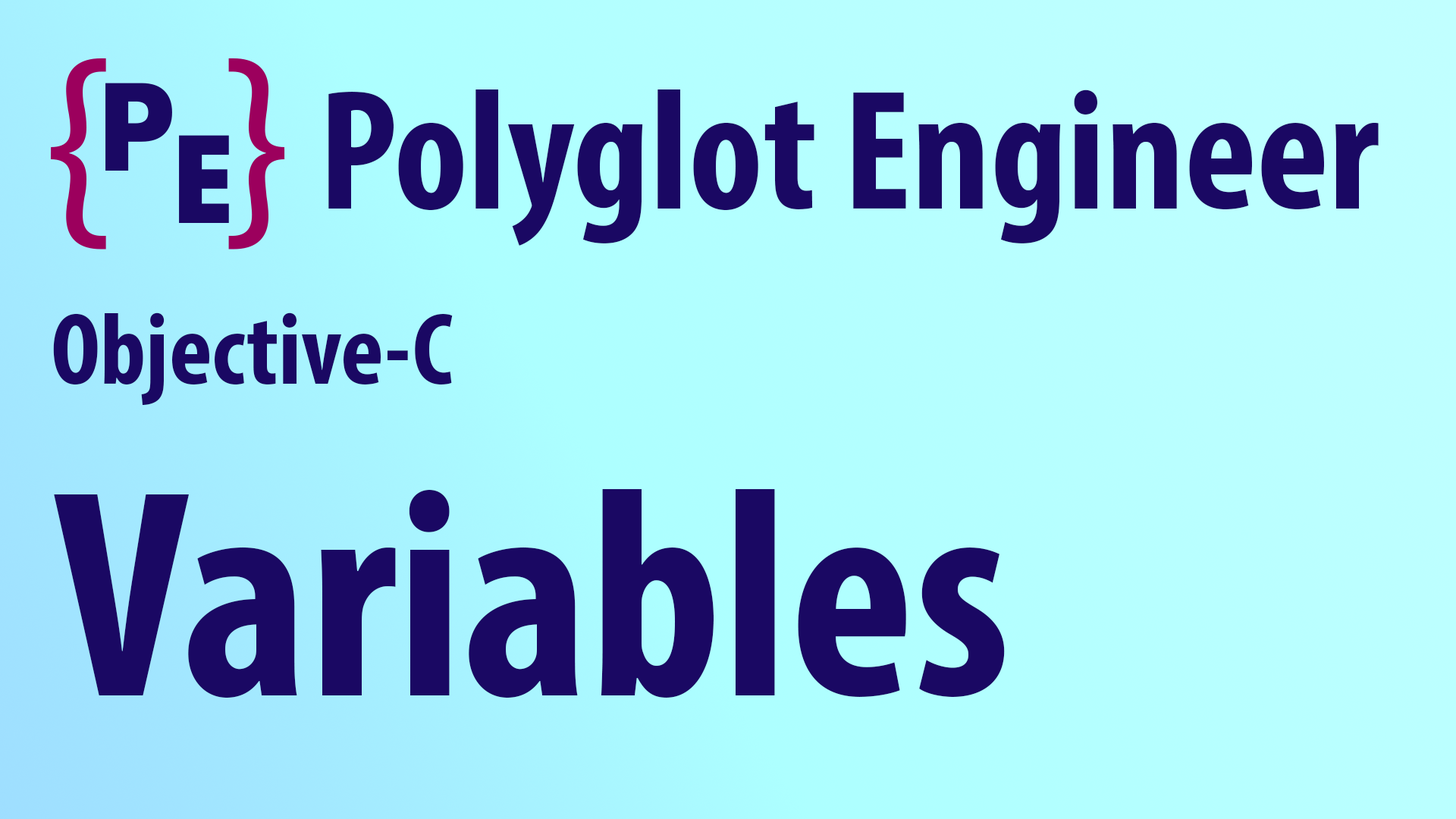
<style>
.page{position:relative;width:1456px;height:819px}
.page>*{position:absolute;margin:0}
.t1{font:172.1px "MyriadPro-BoldCond";color:#1a0863}
.t2{font:102.4px "MyriadPro-BoldCond";color:#1a0863}
.t3{font:298.1px "MyriadPro-BoldCond";color:#1a0863}
</style>
<div class="page">
<p class="t1" style="left:328px;top:89px;width:1051px;height:157px">Polyglot Engineer</p>
<p class="t2" style="left:53px;top:312px;width:400px;height:93px">Objective-C</p>
<p class="t3" style="left:54px;top:489px;width:951px;height:209px">Variables</p>
</div>
